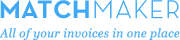
<style>
.page{position:relative;width:180px;height:40px;background:#ffffff}
.page>*{position:absolute;margin:0}
.t1{font:12px "Georgia-Italic";letter-spacing:0.025em;color:#55b0f0}
</style>
<div class="page">
<p class="t1" style="left:0px;top:28px;width:180px;height:12px">All of your invoices in one place</p>
</div>
